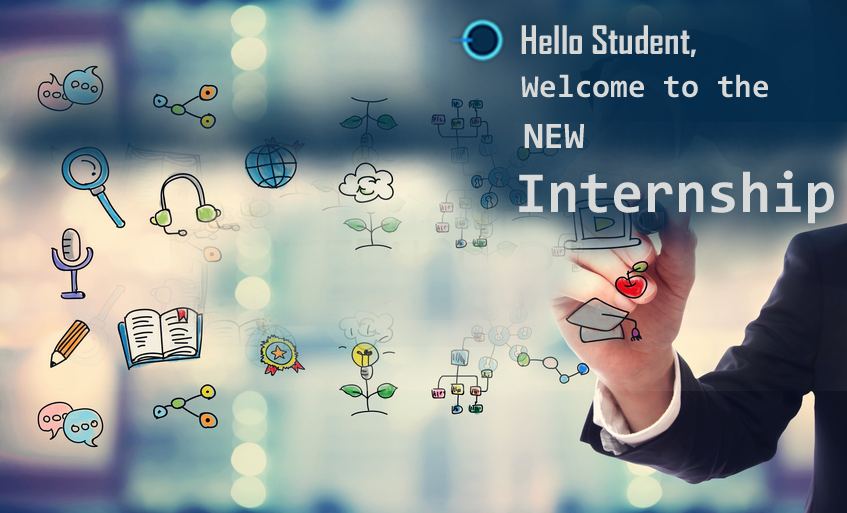
<style>
.page{position:relative;width:847px;height:513px}
.page>*{position:absolute;margin:0}
.t1{font:37.6px "AgencyFB-Bold";color:#d8d9d9}
.t2{font:32.3px "Consolas-Bold";color:#d8d9d9}
.t3{font:37.6px "Consolas-Bold";color:#d8d9d9}
.t4{font:58.3px "Consolas-Bold";color:#d8d9d9}
</style>
<div class="page">
<p class="t1" style="left:521px;top:25px;width:175px;height:32px">Hello Student,</p>
<p class="t2" style="left:521px;top:74px;width:247px;height:24px">Welcome to the</p>
<p class="t3" style="left:524px;top:124px;width:60px;height:24px">NEW</p>
<p class="t4" style="left:519px;top:170px;width:315px;height:54px">Internship</p>
</div>
